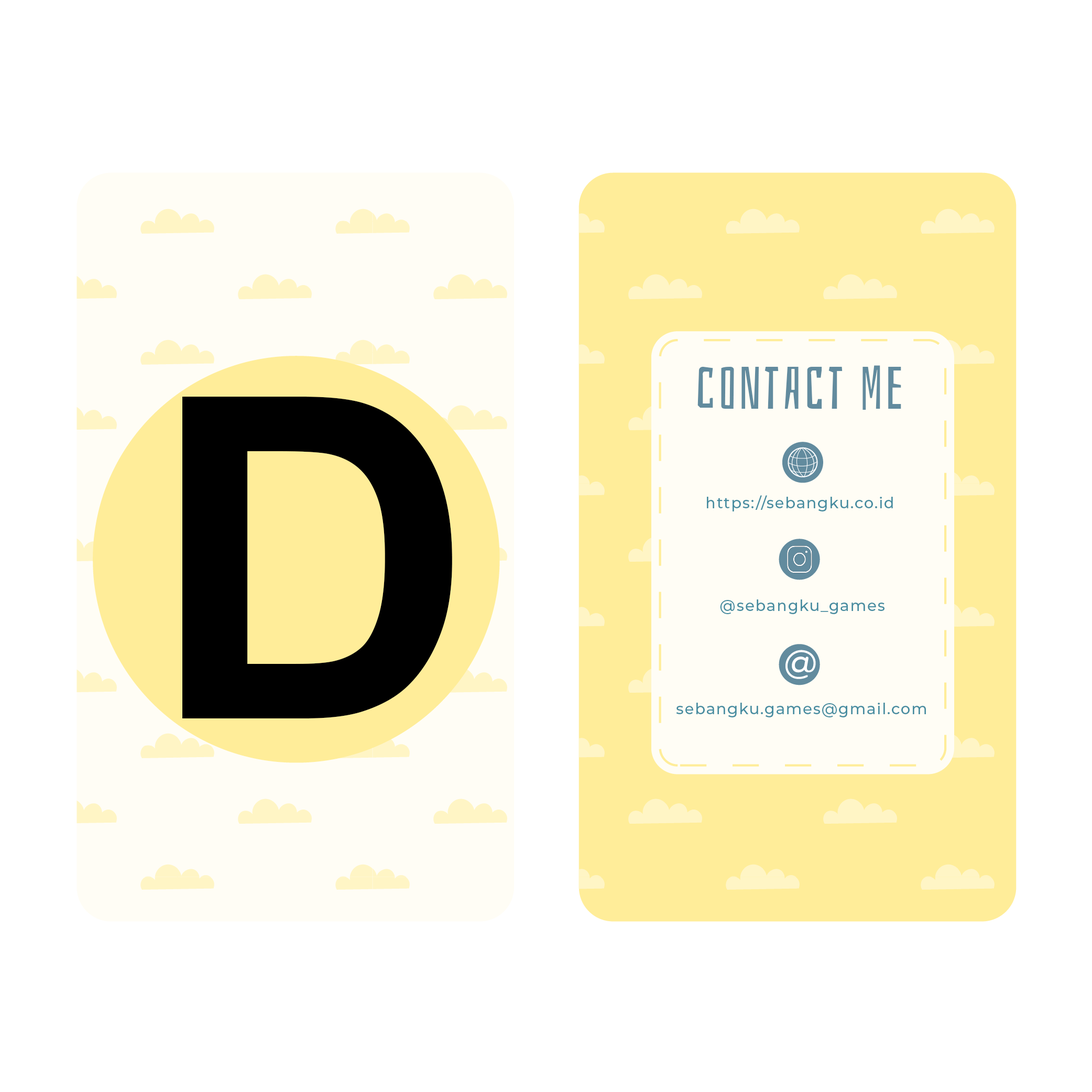
<style>
.page{position:relative;width:1092px;height:1092px;background:#ffffff}
.page>*{position:absolute;margin:0}
.t1{font:58.9px "Bahiana-Regular";letter-spacing:0.057em;color:#628b9e}
.t2{font:449.8px "Arial-BoldMT";letter-spacing:0.057em;color:#000000}
.t3{font:15.3px "Montserrat-Medium";letter-spacing:0.057em;color:#468ca0}
</style>
<div class="page">
<p class="t1" style="left:697px;top:365px;width:204px;height:45px">contact me</p>
<p class="t2" style="left:182px;top:397px;width:270px;height:321px">D</p>
<p class="t3" style="left:707px;top:495px;width:186px;height:16px">https://sebangku.co.id</p>
<p class="t3" style="left:720px;top:599px;width:164px;height:15px">@sebangku_games</p>
<p class="t3" style="left:676px;top:703px;width:250px;height:14px">sebangku.games@gmail.com</p>
</div>
